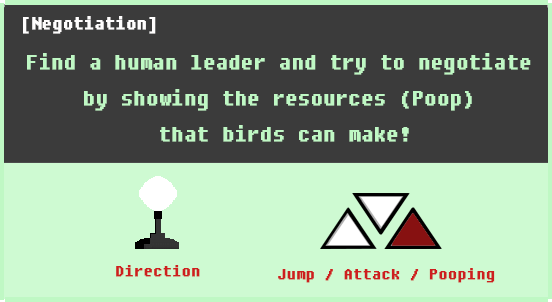
<style>
.page{position:relative;width:552px;height:302px;background:#3b3b3b}
.page>*{position:absolute;margin:0}
.t1{font:20px "DungGeunMo";color:#fffefe;font-weight:bold}
.t2{font:24px/36px "DungGeunMo";color:#bff8c4;font-weight:bold}
.t3{font:18px "DungGeunMo";color:#cd1f1f;font-weight:bold}
</style>
<div class="page">
<p class="t1" style="left:23px;top:16px;width:133px;height:18px">[Negotiation]</p>
<p class="t2" style="left:27px;top:53px;width:504px;height:89px;text-align:center">Find a human leader and try to negotiate <br>by showing the resources (Poop) <br>that birds can make!</p>
<p class="t3" style="left:116px;top:265px;width:84px;height:12px">Direction</p>
<p class="t3" style="left:278px;top:268px;width:217px;height:15px">Jump / Attack / Pooping</p>
</div>
